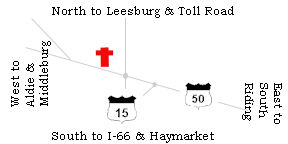
<style>
.page{position:relative;width:288px;height:144px;background:#ffffff}
.page>*{position:absolute;margin:0}
.t1{font:12px "BookmanOldStyle";color:#000000}
</style>
<div class="page">
<p class="t1" style="left:52px;top:6px;width:182px;height:12px">North to Leesburg &amp; Toll Road</p>
<p class="t1" style="left:11px;top:41px;width:40px;height:66px;rotate:-90deg">West to Aldie &amp; Middleburg</p>
<p class="t1" style="left:11px;top:41px;width:40px;height:66px;rotate:-90deg">West to Aldie &amp; Middleburg</p>
<p class="t1" style="left:242px;top:83px;width:40px;height:41px;rotate:90deg">East to South Riding</p>
<p class="t1" style="left:52px;top:131px;width:162px;height:12px">South to I-66 &amp; Haymarket</p>
</div>
